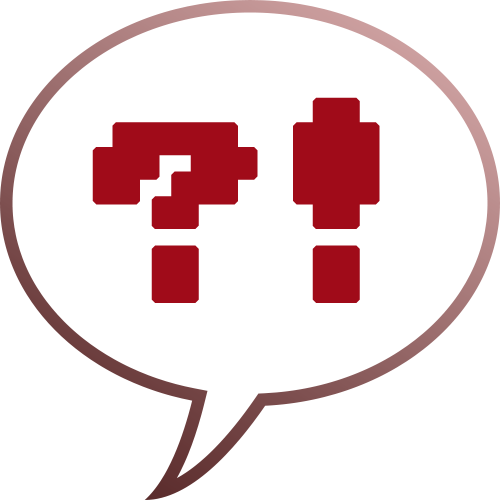
<style>
.page{position:relative;width:500px;height:500px;background:#ffffff}
.page>*{position:absolute;margin:0}
.t1{font:196.9px "PokemonGB";color:#a00b19;font-weight:bold;scale:0.8 1}
</style>
<div class="page">
<p class="t1" style="left:92px;top:97px;width:288px;height:206px">?!</p>
</div>
